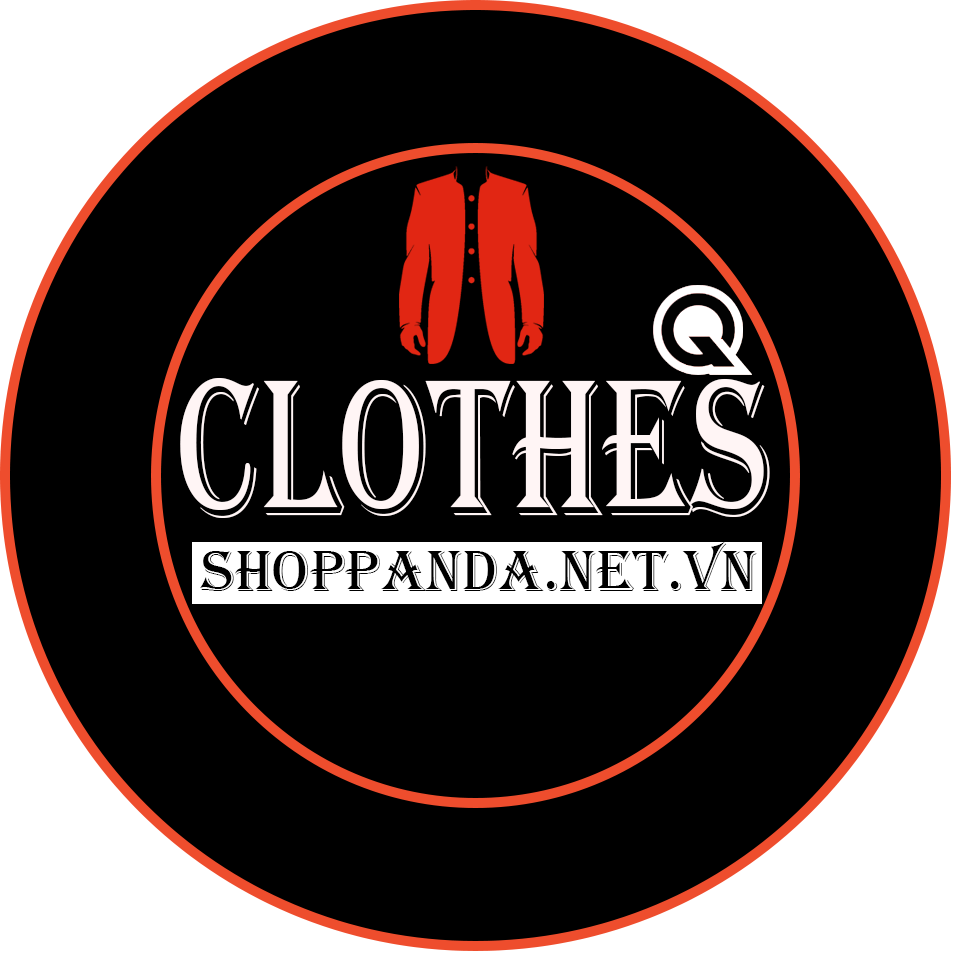
<style>
.page{position:relative;width:960px;height:960px;background:#000000}
.page>*{position:absolute;margin:0}
.t1{font:201.3px "Algerian";color:#fff5f5;scale:0.71 1}
.t2{font:60px "Algerian";color:#010101}
</style>
<div class="page">
<p class="t1" style="left:180px;top:377px;width:590px;height:141px">CLOTHES</p>
<p class="t2" style="left:200px;top:541px;width:557px;height:50px">SHOPPANDA.NET.VN</p>
</div>
